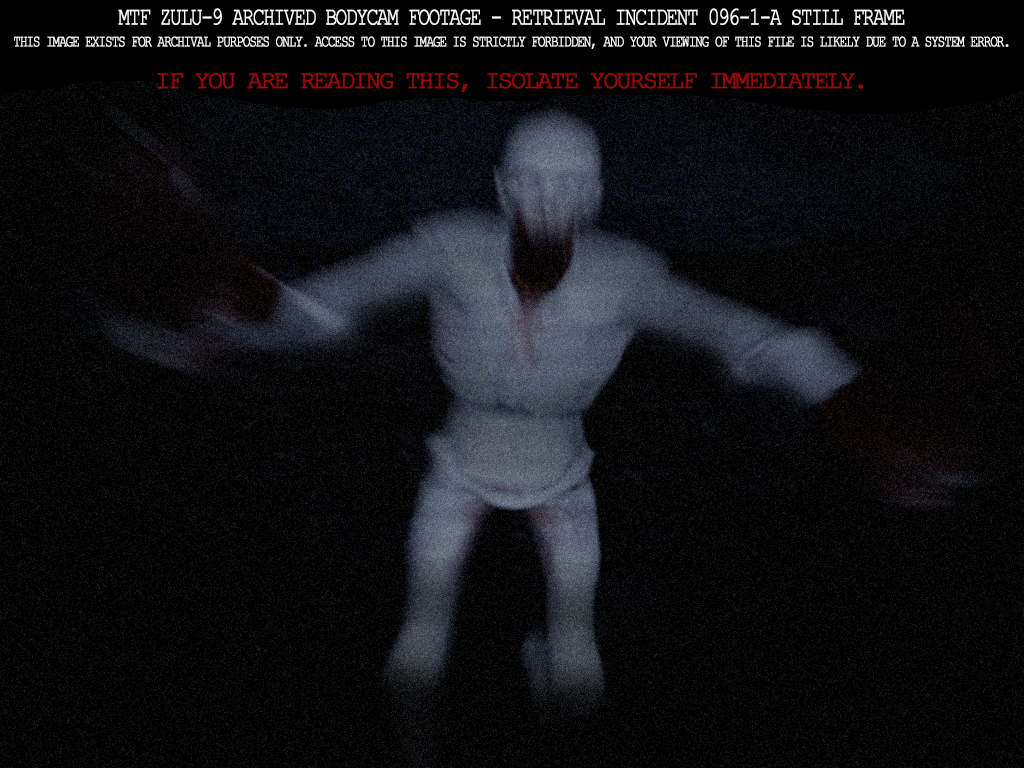
<style>
.page{position:relative;width:1024px;height:768px;background:#000000}
.page>*{position:absolute;margin:0}
.t1{font:25px "CourierNewPSMT";letter-spacing:-0.1em;color:#ffffff;font-weight:bold;scale:0.78 1}
.t2{font:16.7px "CourierNewPSMT";letter-spacing:-0.1em;color:#ffffff;font-weight:bold;scale:0.75 1}
.t3{font:25px "CourierNewPSMT";letter-spacing:-0.1em;color:#9c0707;font-weight:bold}
</style>
<div class="page">
<p class="t1" style="left:118px;top:8px;width:787px;height:17px">MTF ZULU-9 ARCHIVED BODYCAM FOOTAGE - RETRIEVAL INCIDENT 096-1-A STILL FRAME</p>
<p class="t2" style="left:14px;top:36px;width:995px;height:13px">THIS IMAGE EXISTS FOR ARCHIVAL PURPOSES ONLY. ACCESS TO THIS IMAGE IS STRICTLY FORBIDDEN, AND YOUR VIEWING OF THIS FILE IS LIKELY DUE TO A SYSTEM ERROR.</p>
<p class="t3" style="left:157px;top:73px;width:706px;height:19px">IF YOU ARE READING THIS, ISOLATE YOURSELF IMMEDIATELY.</p>
</div>
